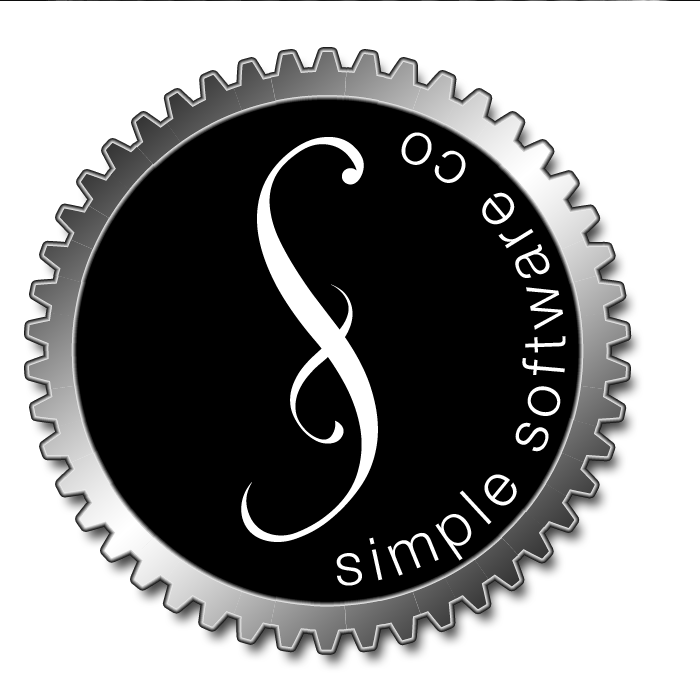
<style>
.page{position:relative;width:700px;height:700px;background:#ffffff}
.page>*{position:absolute;margin:0}
.t1{font:60px "HelveticaNeue-Light";letter-spacing:0.2em;color:#ffffff}
</style>
<div class="page">
<p class="t1" style="left:336px;top:131px;width:230px;height:454px;rotate:6deg">simple software co</p>
</div>
